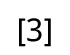
<style>
.page{position:relative;width:70px;height:55px;background:#ffffff}
.page>*{position:absolute;margin:0}
.t1{font:31.8px "DroidSans";color:#000000}
</style>
<div class="page">
<p class="t1" style="left:19px;top:18px;width:32px;height:29px">[3]</p>
</div>
